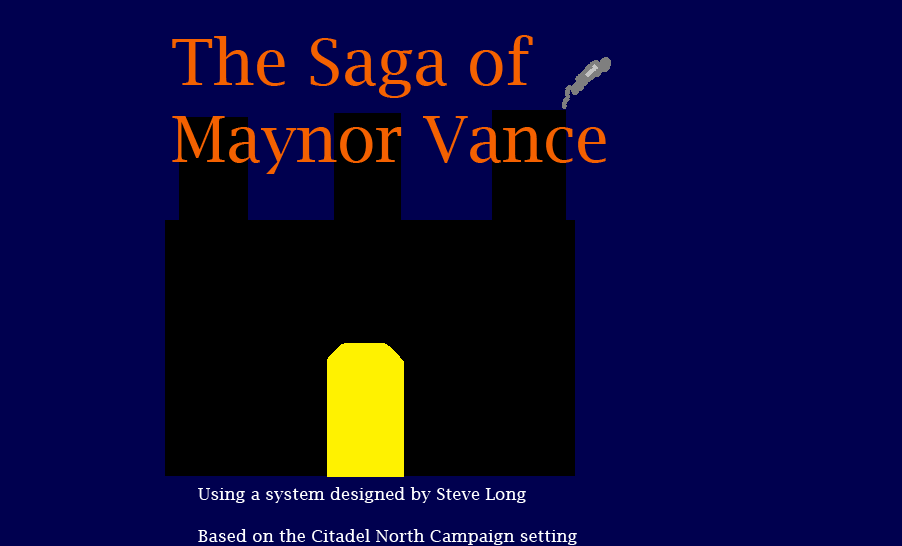
<style>
.page{position:relative;width:902px;height:546px;background:#00004f}
.page>*{position:absolute;margin:0}
.t1{font:64px "LucidaBright";color:#f46100}
.t2{font:17.3px "LucidaBright";color:#ffffff}
</style>
<div class="page">
<p class="t1" style="left:172px;top:35px;width:434px;height:139px">The Saga of <br>Maynor Vance</p>
<p class="t2" style="left:198px;top:487px;width:379px;height:58px">Using a system designed by Steve Long<br><br>Based on the Citadel North Campaign setting</p>
</div>
